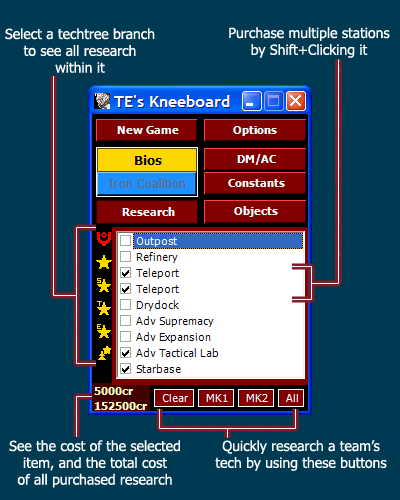
<style>
.page{position:relative;width:400px;height:500px;background:#003952}
.page>*{position:absolute;margin:0}
.t1{font:14px "Tahoma";color:#ffffff}
</style>
<div class="page">
<p class="t1" style="left:5px;top:28px;width:150px;height:45px;text-align:center">Select a techtree branch<br>to see all research<br>within it</p>
<p class="t1" style="left:229px;top:27px;width:161px;height:31px;text-align:center">Purchase multiple stations<br>by Shift+Clicking it</p>
<p class="t1" style="left:9px;top:440px;width:171px;height:48px;text-align:center">See the cost of the selected<br>item, and the total cost<br>of all purchased research</p>
<p class="t1" style="left:215px;top:440px;width:172px;height:31px;text-align:center">Quickly research a team’s<br>tech by using these buttons</p>
</div>
